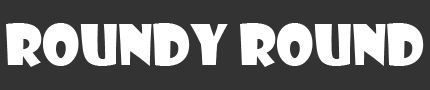
<style>
.page{position:relative;width:430px;height:90px;background:#333333}
.page>*{position:absolute;margin:0}
.t1{font:54.2px "ShowcardGothic-Reg";color:#ffffff}
</style>
<div class="page">
<p class="t1" style="left:6px;top:23px;width:418px;height:44px">Roundy Round</p>
</div>
